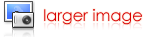
<style>
.page{position:relative;width:150px;height:37px;background:#ffffff}
.page>*{position:absolute;margin:0}
.t1{font:16px "CenturyGothic";color:#d90000}
</style>
<div class="page">
<p class="t1" style="left:44px;top:9px;width:98px;height:16px">larger image</p>
</div>
